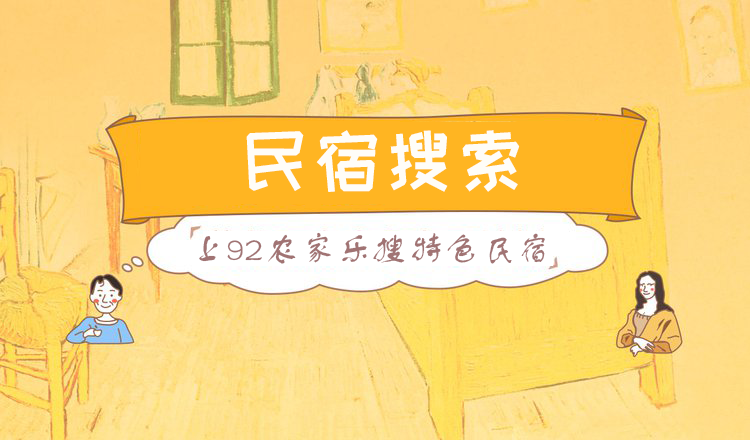
<style>
.page{position:relative;width:750px;height:440px}
.page>*{position:absolute;margin:0}
.t1{font:72px "HappyZcool-2016";color:#fffdf8}
.t2{font:36px "FZSTK--GBK1-0";color:#a17373}
</style>
<div class="page">
<p class="t1" style="left:246px;top:130px;width:274px;height:62px">民宿搜索</p>
<p class="t2" style="left:199px;top:232px;width:346px;height:32px">上92农家乐搜特色民宿</p>
</div>
